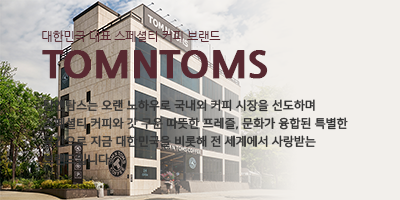
<style>
.page{position:relative;width:400px;height:200px;background:#f2efeb}
.page>*{position:absolute;margin:0}
.t1{font:11.8px "NanumGothic";color:#582931}
.t2{font:37.8px "NanumGothicExtraBold";color:#582931;text-transform:uppercase;font-weight:bold}
.t3{font:11.8px/18px "NanumSquareR";color:#333333;text-transform:uppercase;font-weight:bold}
</style>
<div class="page">
<p class="t1" style="left:42px;top:30px;width:179px;height:12px">대한민국 대표 스페셜티 커피 브랜드</p>
<p class="t2" style="left:42px;top:50px;width:226px;height:29px">tomntoms</p>
<p class="t3" style="left:43px;top:99px;width:305px;height:66px">탐앤탐스는 오랜 노하우로 국내외 커피 시장을 선도하며<br>스페셜티 커피와 갓 구운 따뜻한 프레즐, 문화가 융합된 특별한 공간으로 지금 대한민국을 비롯해 전 세계에서 사랑받는 브랜드입니다.</p>
</div>
